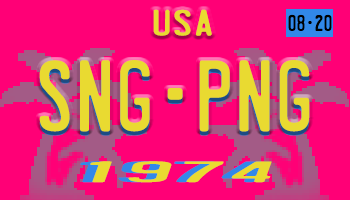
<style>
.page{position:relative;width:350px;height:200px;background:#ff0076}
.page>*{position:absolute;margin:0}
.t1{font:32.8px "LicensePlate";color:#e9da31;scale:1.46 1}
.t2{font:20.4px "LicensePlate";color:#000000}
.t3{font:90.7px "LicensePlate";color:#e9da31}
.t4{font:28.1px "LicensePlate";color:#3188e9;scale:4.16 1}
.t5{font:28.1px "LicensePlate";color:#e9da31;scale:4.16 1}
</style>
<div class="page">
<p class="t1" style="left:153px;top:9px;width:59px;height:27px">USA</p>
<p class="t2" style="left:288px;top:14px;width:44px;height:17px">08-20</p>
<p class="t3" style="left:39px;top:64px;width:271px;height:72px">sng-png</p>
<p class="t3" style="left:39px;top:60px;width:271px;height:72px">sng-png</p>
<p class="t4" style="left:80px;top:161px;width:182px;height:22px">1974</p>
<p class="t5" style="left:90px;top:161px;width:182px;height:22px">1974</p>
</div>
